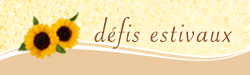
<style>
.page{position:relative;width:250px;height:75px;background:#ebc99e}
.page>*{position:absolute;margin:0}
.t1{font:36px "SavoyeLetPlain";letter-spacing:0.05em;color:#924e13}
</style>
<div class="page">
<p class="t1" style="left:94px;top:16px;width:138px;height:33px">défis estivaux</p>
</div>
